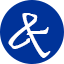
<style>
.page{position:relative;width:64px;height:64px;background:#003399}
.page>*{position:absolute;margin:0}
.t1{font:61px "Pristina-Regular";color:#ffffff}
</style>
<div class="page">
<p class="t1" style="left:8px;top:13px;width:43px;height:45px">&amp;</p>
</div>
